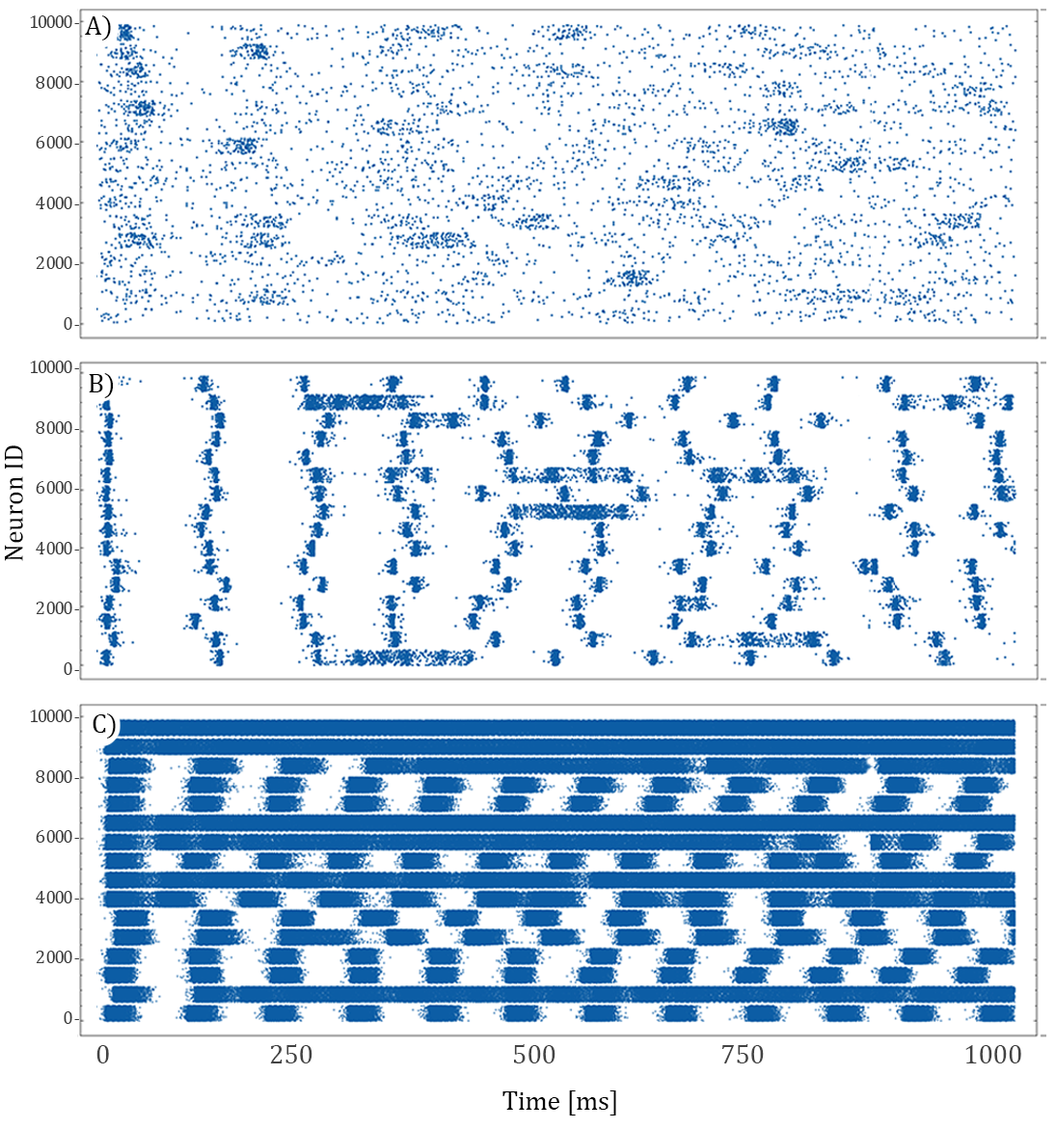
<style>
.page{position:relative;width:1056px;height:1129px;background:#ffffff}
.page>*{position:absolute;margin:0}
.t1{font:18.8px/12.1px "CambriaMath";letter-spacing:-0.1em;color:#3a3a3a}
.t2{font:26.8px "CambriaMath";color:#000000}
.t3{font:26.8px "CambriaMath";color:#434343}
</style>
<div class="page">
<p class="t1" style="left:30px;top:15px;width:49px;height:315px;text-align:right">10000 -<br><br><br><br><br>8 000 -<br><br><br><br><br>6 000 -<br><br><br><br><br>4 000 -<br><br><br><br><br>2 000 -<br><br><br><br><br>0 -</p>
<p class="t2" style="left:85px;top:15px;width:26px;height:26px">A)</p>
<p class="t1" style="left:30px;top:361px;width:49px;height:314px;text-align:right">10000 -<br><br><br><br><br>8 000 -<br><br><br><br><br>6 000 -<br><br><br><br><br>4 000 -<br><br><br><br><br>2 000 -<br><br><br><br><br>0 -</p>
<p class="t2" style="left:89px;top:373px;width:25px;height:25px">B)</p>
<p class="t2" style="left:5px;top:446px;width:18px;height:115px;rotate:-90deg">Neuron ID</p>
<p class="t1" style="left:30px;top:710px;width:49px;height:314px;text-align:right">10000 -<br><br><br><br><br>8 000 -<br><br><br><br><br>6 000 -<br><br><br><br><br>4 000 -<br><br><br><br><br>2 000 -<br><br><br><br><br>0 -</p>
<p class="t2" style="left:93px;top:714px;width:23px;height:25px">C)</p>
<p class="t3" style="left:96px;top:1044px;width:925px;height:20px">0     250      500     750      1000</p>
<p class="t2" style="left:502px;top:1091px;width:114px;height:25px">Time [ms]</p>
</div>
